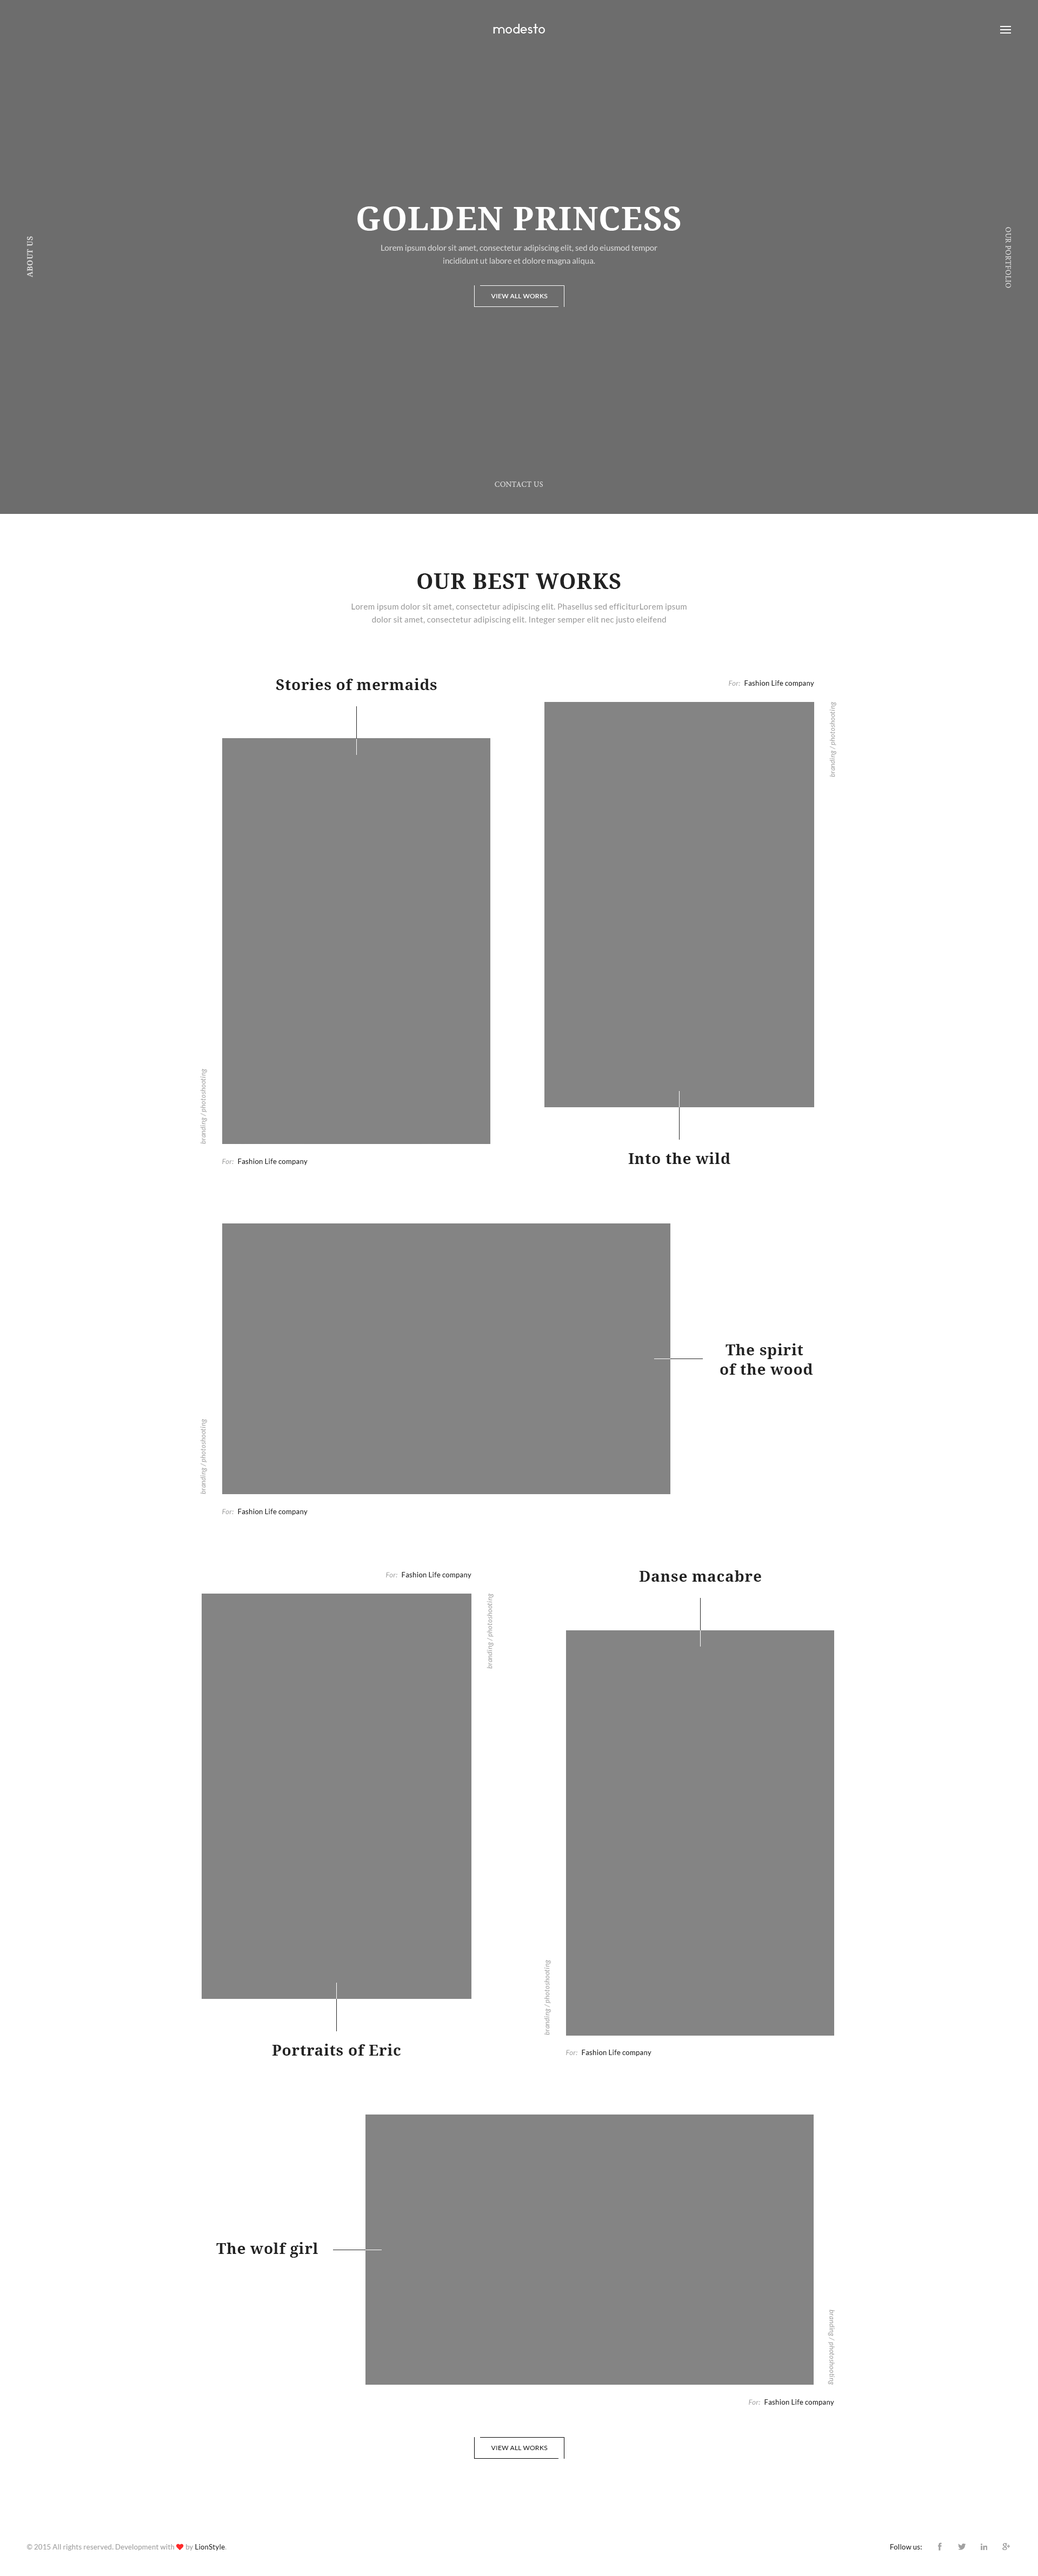
<style>
.page{position:relative;width:1038px;height:2576px;background:#ffffff}
.page>*{position:absolute;margin:0}
.t1{font:13px "Ikaros";letter-spacing:0.025em;color:#ffffff}
.t2{font:32.4px "DroidSerif-Bold";letter-spacing:0.025em;color:#ffffff;text-transform:uppercase}
.t3{font:7.6px "MinionPro-Regular";letter-spacing:0.025em;color:#dadada;text-transform:uppercase}
.t4{font:7.6px "DroidSerif-Bold";letter-spacing:0.025em;color:#dadada;text-transform:uppercase}
.t5{font:8.1px/13px "Lato-Regular";color:#dadada}
.t6{font:6.5px "Lato-Regular";letter-spacing:0.025em;color:#ffffff;text-transform:uppercase}
.t7{font:21.6px "DroidSerif-Bold";letter-spacing:0.025em;color:#222222;text-transform:uppercase}
.t8{font:8.1px/13px "Lato-Regular";letter-spacing:0.025em;color:#989898}
.t9{font:15.1px "DroidSerif-Bold";letter-spacing:0.025em;color:#222222}
.t10{font:7px "Lato-Italic";letter-spacing:0.025em;color:#989898}
.t11{font:7.1px "Lato-Regular";letter-spacing:0.025em;color:#222222}
.t12{font:7.1px "Lato-Italic";letter-spacing:0.025em;color:#989898;scale:0.97 1}
.t13{font:15.1px/19.5px "DroidSerif-Bold";letter-spacing:0.025em;color:#222222}
.t14{font:6.5px "Lato-Regular";letter-spacing:0.025em;color:#222222;text-transform:uppercase}
.t15{font:7px "Lato-Regular";letter-spacing:0.025em;color:#a1a1a1}
.t16{font:7px "FontAwesome";letter-spacing:0.025em;color:#fe2b2b}
.t17{font:7px "Lato-Regular";letter-spacing:0.025em;color:#222222}
.t18{font:7px "Lato-Regular";letter-spacing:0.025em;color:#b5b5b5}
</style>
<div class="page">
<p class="t1" style="left:493px;top:24px;width:52px;height:10px">modesto</p>
<p class="t2" style="left:357px;top:206px;width:323px;height:25px">golden princess</p>
<p class="t3" style="left:1005px;top:227px;width:6px;height:61px;rotate:90deg">our portfolio</p>
<p class="t4" style="left:27px;top:236px;width:6px;height:41px;rotate:-90deg">about us</p>
<p class="t5" style="left:381px;top:245px;width:276px;height:20px;text-align:center">Lorem ipsum dolor sit amet, consectetur adipiscing elit, sed do eiusmod tempor incididunt ut labore et dolore magna aliqua.</p>
<p class="t6" style="left:491px;top:294px;width:56px;height:4px">view all works</p>
<p class="t3" style="left:494px;top:481px;width:49px;height:6px">contact us</p>
<p class="t7" style="left:417px;top:573px;width:203px;height:16px">Our best works</p>
<p class="t8" style="left:351px;top:604px;width:335px;height:20px;text-align:center">Lorem ipsum dolor sit amet, consectetur adipiscing elit. Phasellus sed efficiturLorem ipsum dolor sit amet, consectetur adipiscing elit. Integer semper elit nec justo eleifend</p>
<p class="t9" style="left:276px;top:678px;width:161px;height:12px">Stories of mermaids</p>
<p class="t10" style="left:728px;top:680px;width:12px;height:6px">For:</p>
<p class="t11" style="left:744px;top:680px;width:70px;height:7px">Fashion Life company</p>
<p class="t12" style="left:829px;top:701px;width:7px;height:76px;rotate:-90deg">branding / photoshooting</p>
<p class="t12" style="left:200px;top:1068px;width:7px;height:76px;rotate:-90deg">branding / photoshooting</p>
<p class="t9" style="left:628px;top:1152px;width:102px;height:12px">Into the wild</p>
<p class="t10" style="left:222px;top:1159px;width:11px;height:5px">For:</p>
<p class="t11" style="left:238px;top:1159px;width:69px;height:6px">Fashion Life company</p>
<p class="t13" style="left:720px;top:1343px;width:93px;height:32px;text-align:center">The spirit <br>of the wood</p>
<p class="t12" style="left:200px;top:1419px;width:7px;height:75px;rotate:-90deg">branding / photoshooting</p>
<p class="t10" style="left:222px;top:1509px;width:11px;height:5px">For:</p>
<p class="t11" style="left:238px;top:1509px;width:69px;height:6px">Fashion Life company</p>
<p class="t10" style="left:386px;top:1572px;width:11px;height:5px">For:</p>
<p class="t11" style="left:402px;top:1572px;width:69px;height:6px">Fashion Life company</p>
<p class="t9" style="left:639px;top:1570px;width:122px;height:12px">Danse macabre</p>
<p class="t12" style="left:486px;top:1593px;width:7px;height:76px;rotate:-90deg">branding / photoshooting</p>
<p class="t12" style="left:544px;top:1959px;width:7px;height:76px;rotate:-90deg">branding / photoshooting</p>
<p class="t9" style="left:272px;top:2044px;width:128px;height:12px">Portraits of Eric</p>
<p class="t10" style="left:566px;top:2050px;width:11px;height:5px">For:</p>
<p class="t11" style="left:581px;top:2050px;width:70px;height:6px">Fashion Life company</p>
<p class="t9" style="left:216px;top:2242px;width:102px;height:16px">The wolf girl</p>
<p class="t12" style="left:827px;top:2310px;width:7px;height:75px;rotate:90deg">branding / photoshooting</p>
<p class="t10" style="left:748px;top:2399px;width:12px;height:6px">For:</p>
<p class="t11" style="left:764px;top:2399px;width:70px;height:7px">Fashion Life company</p>
<p class="t14" style="left:491px;top:2446px;width:56px;height:4px">view all works</p>
<p class="t15" style="left:26px;top:2544px;width:200px;height:7px">© 2015 All rights reserved. Development with <span class="t16">♥ </span>by<span class="t17"> LionStyle</span><span class="t18">.</span></p>
<p class="t17" style="left:890px;top:2544px;width:31px;height:6px">Follow us:</p>
</div>
